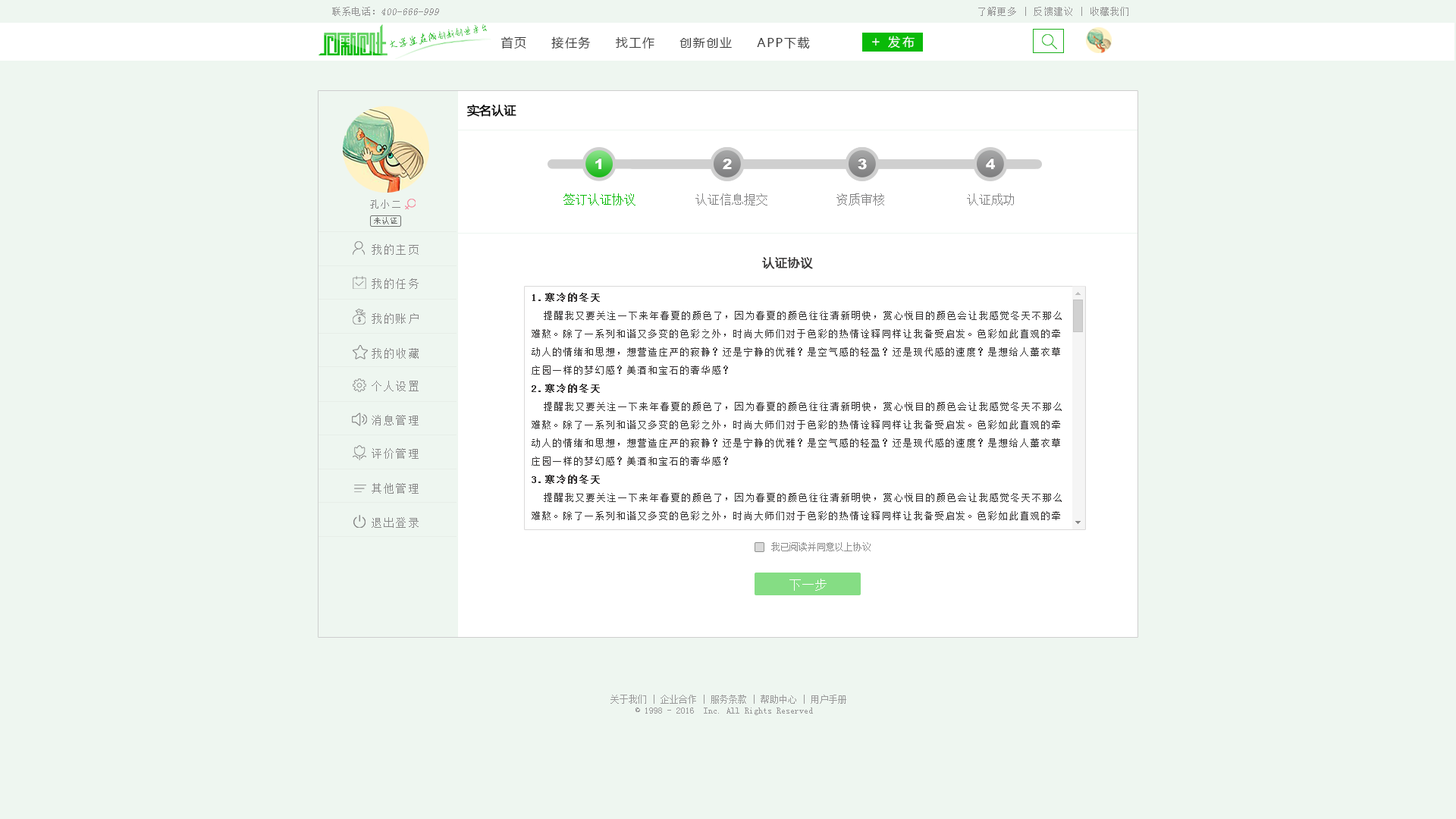
<style>
.page{position:relative;width:1456px;height:819px;background:#eef6f0}
.page>*{position:absolute;margin:0}
.t1{font:10.1px "SimSun";color:#959595;font-style:italic}
.t2{font:10.1px "SimSun";color:#959595}
.t3{font:9.1px "SimSun";letter-spacing:0.1em;color:#959494}
.t4{font:9.4px "AnJingCheng-Xing-2.0";letter-spacing:-0.01em;color:#09ba08}
.t5{font:10.6px "AnJingCheng-Xing-2.0";letter-spacing:-0.01em;color:#09ba08}
.t6{font:12.1px "MicrosoftYaHei";letter-spacing:0.1em;color:#3e3e3e}
.t7{font:14.2px "MicrosoftYaHei";letter-spacing:0.2em;color:#ffffff}
.t8{font:12.1px "MicrosoftYaHei";letter-spacing:0.2em;color:#ffffff}
.t9{font:12.1px "MicrosoftYaHei";letter-spacing:0.01em;color:#000000;font-weight:bold}
.t10{font:14.4px "Arial-Black";color:#ffffff}
.t11{font:12.1px "SimSun";color:#09ba08}
.t12{font:12.1px "SimSun";color:#838384}
.t13{font:10.1px "SimSun";letter-spacing:0.1em;color:#888888}
.t14{font:8.1px "SimSun";color:#727472}
.t15{font:11.1px "SimSun";letter-spacing:0.1em;color:#888888}
.t16{font:12.1px "MicrosoftYaHei";letter-spacing:0.05em;color:#343232;font-weight:bold}
.t17{font:10.1px/18.2px "SimSun";letter-spacing:0.075em;color:#343232}
.t18{font:10.1px/18.2px "SimSun";letter-spacing:0.075em;color:#343232;font-weight:bold}
.t19{font:9.1px "SimSun";color:#8e8d8d}
.t20{font:12.1px "SimSun";letter-spacing:0.075em;color:#ffffff}
.t21{font:9.1px "SimSun";color:#999999}
</style>
<div class="page">
<p class="t1" style="left:332px;top:7px;width:107px;height:9px"><span class="t2">联系电话：</span>400-666-999</p>
<p class="t3" style="left:978px;top:7px;width:150px;height:9px">了解更多 | 反馈建议 | 收藏我们</p>
<p class="t4" style="left:390px;top:24px;width:98px;height:24px;rotate:-10deg"><span class="t5">大学生在线</span>创新创业平台</p>
<p class="t6" style="left:500px;top:36px;width:310px;height:13px">首页     接任务     找工作     创新创业     APP下载</p>
<p class="t7" style="left:872px;top:38px;width:8px;height:7px">+</p>
<p class="t8" style="left:888px;top:36px;width:27px;height:12px">发布</p>
<p class="t9" style="left:467px;top:104px;width:49px;height:13px">实名认证</p>
<p class="t10" style="left:595px;top:158px;width:6px;height:11px">1</p>
<p class="t10" style="left:723px;top:158px;width:9px;height:11px">2</p>
<p class="t10" style="left:858px;top:158px;width:9px;height:12px">3</p>
<p class="t10" style="left:986px;top:158px;width:9px;height:11px">4</p>
<p class="t11" style="left:563px;top:193px;width:72px;height:13px">签订认证协议</p>
<p class="t12" style="left:695px;top:193px;width:72px;height:13px">认证信息提交</p>
<p class="t12" style="left:836px;top:193px;width:48px;height:13px">资质审核</p>
<p class="t12" style="left:967px;top:193px;width:47px;height:13px">认证成功</p>
<p class="t13" style="left:370px;top:199px;width:30px;height:10px">孔小二</p>
<p class="t14" style="left:374px;top:217px;width:23px;height:7px">未认证</p>
<p class="t15" style="left:372px;top:244px;width:47px;height:11px">我的主页</p>
<p class="t16" style="left:762px;top:257px;width:51px;height:12px">认证协议</p>
<p class="t15" style="left:372px;top:278px;width:47px;height:11px">我的任务</p>
<p class="t17" style="left:532px;top:293px;width:530px;height:227px"><span class="t18">1.寒冷的冬天<br></span>  提醒我又要关注一下来年春夏的颜色了，因为春夏的颜色往往清新明快，赏心悦目的颜色会让我感觉冬天不那么难熬。除了一系列和谐又多变的色彩之外，时尚大师们对于色彩的热情诠释同样让我备受启发。色彩如此直观的牵动人的情绪和思想，想营造庄严的寂静？还是宁静的优雅？是空气感的轻盈？还是现代感的速度？是想给人薰衣草庄园一样的梦幻感？美酒和宝石的奢华感？<br><span class="t18">2.寒冷的冬天<br></span>  提醒我又要关注一下来年春夏的颜色了，因为春夏的颜色往往清新明快，赏心悦目的颜色会让我感觉冬天不那么难熬。除了一系列和谐又多变的色彩之外，时尚大师们对于色彩的热情诠释同样让我备受启发。色彩如此直观的牵动人的情绪和思想，想营造庄严的寂静？还是宁静的优雅？是空气感的轻盈？还是现代感的速度？是想给人薰衣草庄园一样的梦幻感？美酒和宝石的奢华感？<br><span class="t18">3.寒冷的冬天<br></span>  提醒我又要关注一下来年春夏的颜色了，因为春夏的颜色往往清新明快，赏心悦目的颜色会让我感觉冬天不那么难熬。除了一系列和谐又多变的色彩之外，时尚大师们对于色彩的热情诠释同样让我备受启发。色彩如此直观的牵动人的情绪和思想，想营造庄严的寂静？还是宁静的优雅？是空气感的轻盈？还是现代感的速度？是想给人薰衣草庄园一样的梦幻感？美酒和宝石的奢华感？<br><span class="t18">4.寒冷的冬天<br></span>  提醒我又要关注一下来年春夏的颜色了，因为春夏的颜色往往清新明快，赏心悦目的颜色会让我感觉冬天不那么难熬。除了一系列和谐又多变的色彩之外，时尚大师们对于色彩的热情诠释同样让我备受启发。色彩如此直观的牵动人的情绪和思想，想营造庄严的寂静？还是宁静的优雅？是空气感的轻盈？还是现代感的速度？是想给人薰衣草庄园一样的梦幻感？美酒和宝石的奢华感？</p>
<p class="t15" style="left:372px;top:313px;width:47px;height:11px">我的账户</p>
<p class="t15" style="left:372px;top:348px;width:47px;height:11px">我的收藏</p>
<p class="t15" style="left:372px;top:381px;width:47px;height:10px">个人设置</p>
<p class="t15" style="left:372px;top:415px;width:47px;height:10px">消息管理</p>
<p class="t15" style="left:372px;top:448px;width:47px;height:11px">评价管理</p>
<p class="t15" style="left:372px;top:483px;width:47px;height:11px">其他管理</p>
<p class="t15" style="left:372px;top:517px;width:47px;height:11px">退出登录</p>
<p class="t19" style="left:771px;top:542px;width:100px;height:9px">我已阅读并同意以上协议</p>
<p class="t20" style="left:789px;top:579px;width:38px;height:12px">下一步</p>
<p class="t21" style="left:610px;top:695px;width:236px;height:20px;text-align:center">关于我们 | 企业合作 | 服务条款 | 帮助中心 | 用户手册<br>© 1998 - 2016  Inc. All Rights Reserved</p>
</div>
